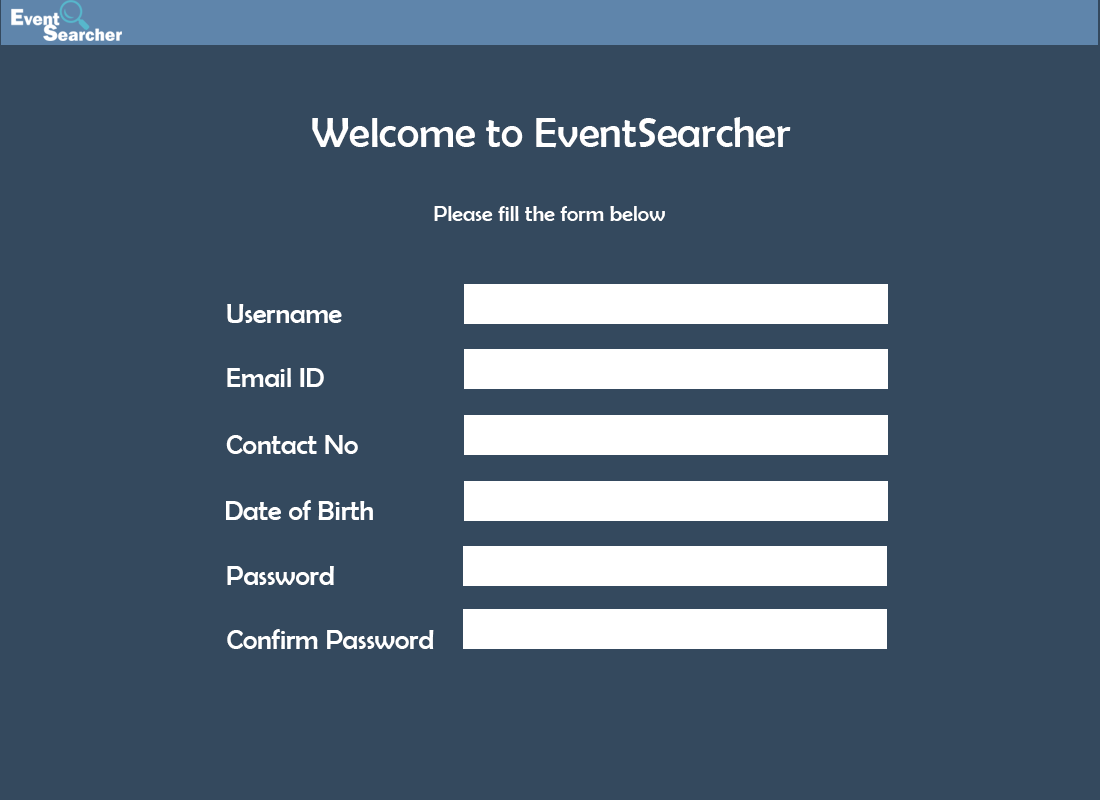
<style>
.page{position:relative;width:1100px;height:800px;background:#34495e}
.page>*{position:absolute;margin:0}
.t1{font:43.1px "BerlinSansFB-Reg";color:#ffffff}
.t2{font:22.2px "BerlinSansFB-Reg";color:#ffffff}
.t3{font:27.8px "BerlinSansFB-Reg";color:#ffffff}
</style>
<div class="page">
<p class="t1" style="left:312px;top:117px;width:479px;height:31px">Welcome to EventSearcher</p>
<p class="t2" style="left:434px;top:206px;width:231px;height:15px">Please fill the form below</p>
<p class="t3" style="left:227px;top:304px;width:115px;height:19px">Username</p>
<p class="t3" style="left:227px;top:368px;width:97px;height:19px">Email ID</p>
<p class="t3" style="left:226px;top:435px;width:132px;height:19px">Contact No</p>
<p class="t3" style="left:226px;top:500px;width:147px;height:20px">Date of Birth</p>
<p class="t3" style="left:227px;top:566px;width:107px;height:19px">Password</p>
<p class="t3" style="left:227px;top:629px;width:207px;height:20px">Confirm Password</p>
</div>
